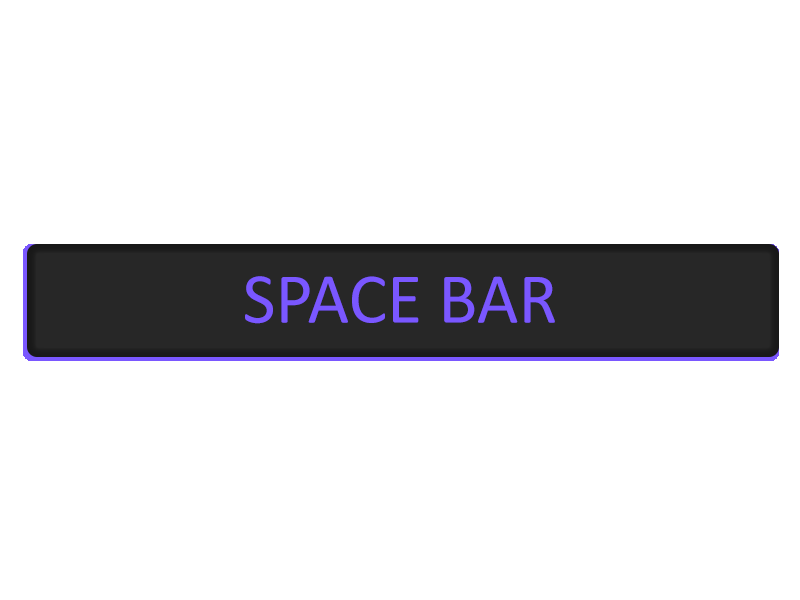
<style>
.page{position:relative;width:800px;height:600px;background:#ffffff}
.page>*{position:absolute;margin:0}
.t1{font:72px "Calibri";color:#7a57ff}
</style>
<div class="page">
<p class="t1" style="left:245px;top:276px;width:310px;height:48px">SPACE BAR</p>
</div>
